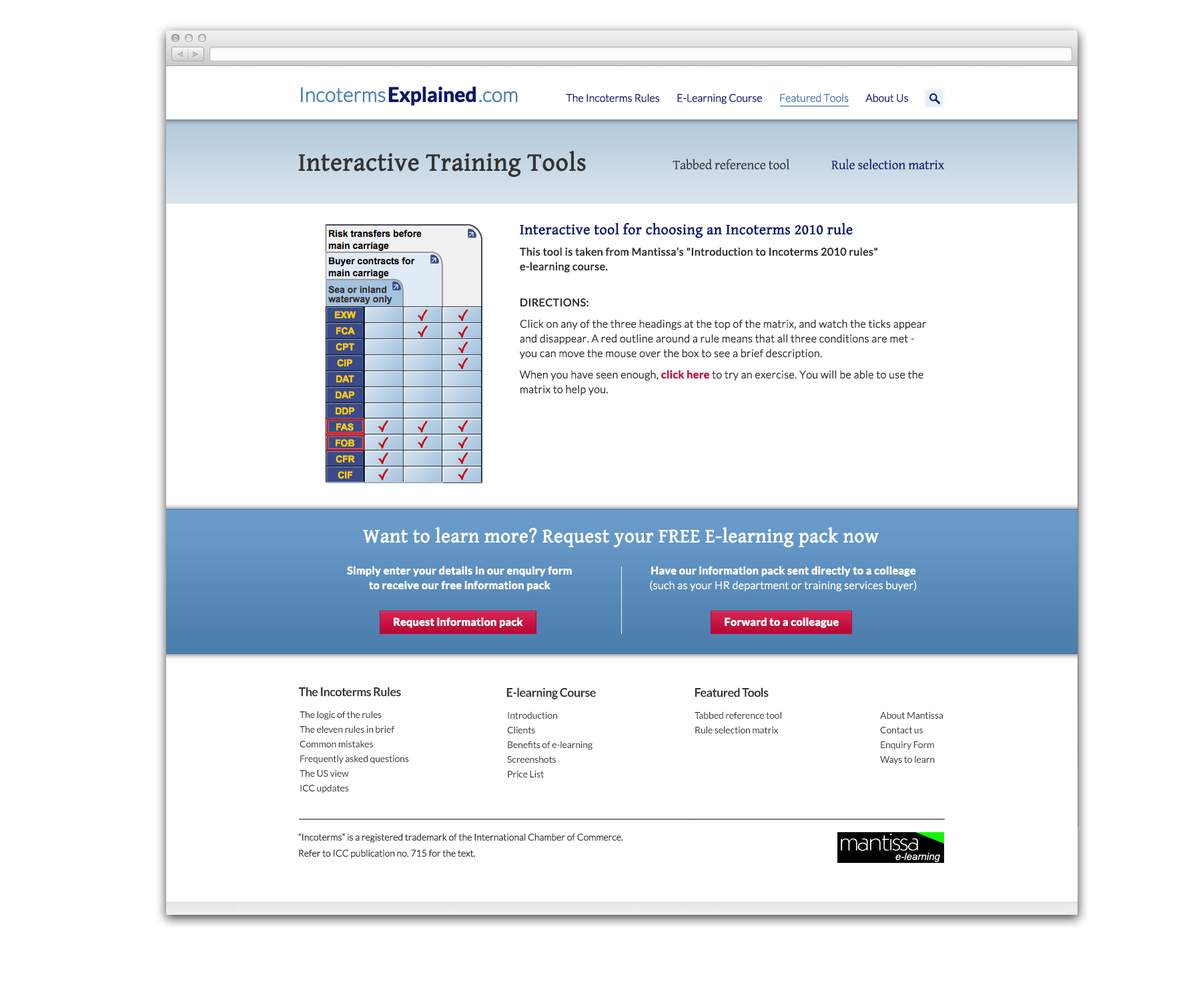
<style>
.page{position:relative;width:1201px;height:993px;background:#ffffff}
.page>*{position:absolute;margin:0}
.t1{font:20px "Lato-Light";letter-spacing:-0.02em;color:#4983b7;font-weight:bold}
.t2{font:20px "Lato-Bold";letter-spacing:-0.02em;color:#091770;font-weight:bold}
.t3{font:20px "Lato-Light";letter-spacing:-0.02em;color:#4882b7;font-weight:bold}
.t4{font:16px "Lato-Regular";letter-spacing:-0.02em;color:#ffffff;font-weight:bold}
.t5{font:16px "Lato-Regular";letter-spacing:-0.02em;color:#ffffff;text-transform:uppercase;font-weight:bold}
.t6{font:10.7px "Lato-Light";letter-spacing:-0.02em;color:#091770;font-weight:bold}
.t7{font:10.7px "Lato-Light";letter-spacing:-0.02em;color:#4882b7;font-weight:bold}
.t8{font:25.4px "GentiumBasic";color:#333333;font-weight:bold}
.t9{font:28.8px "GentiumBasic";letter-spacing:-0.02em;color:#ffffff;text-transform:uppercase;font-weight:bold}
.t10{font:13.3px "GentiumBasic";letter-spacing:-0.01em;color:#333333}
.t11{font:13.3px "GentiumBasic";letter-spacing:-0.01em;color:#091770}
.t12{font:10.7px/14.7px "Lato-Light";color:#313131;font-weight:bold}
.t13{font:14.7px/14.7px "GentiumBasic";color:#091770;font-weight:bold}
.t14{font:10.7px/14.7px "Lato-Regular";color:#313131;font-weight:bold}
.t15{font:10.7px/14.7px "Lato-Bold";color:#c3113e;font-weight:bold}
.t16{font:19.5px "GentiumBasic";color:#ffffff;font-weight:bold}
.t17{font:14.7px "GentiumBasic";letter-spacing:-0.02em;color:#ffffff;text-transform:uppercase;font-weight:bold}
.t18{font:10.7px/14.7px "Lato-Bold";color:#ffffff;font-weight:bold}
.t19{font:10.7px/14.7px "Lato-Light";color:#ffffff;font-weight:bold}
.t20{font:10.7px "Lato-Bold";color:#ffffff;font-weight:bold}
.t21{font:12px "Lato-Bold";letter-spacing:-0.03em;color:#333333}
.t22{font:9.3px/14.7px "Lato-Regular";letter-spacing:-0.01em;color:#333333}
.t23{font:9.3px/16.1px "Lato-Light";letter-spacing:-0.02em;color:#333333;font-weight:bold}
</style>
<div class="page">
<p class="t1" style="left:301px;top:86px;width:217px;height:19px">Incoterms<span class="t2">Explained</span><span class="t3">.com<br></span><span class="t4"><br></span><span class="t5"></span></p>
<p class="t6" style="left:566px;top:93px;width:342px;height:11px">The Incoterms Rules        E-Learning Course        <span class="t7">Featured Tools</span>        About Us</p>
<p class="t8" style="left:298px;top:150px;width:288px;height:27px">Interactive Training Tools<br><span class="t9"></span></p>
<p class="t10" style="left:673px;top:159px;width:272px;height:10px">Tabbed reference tool               <span class="t11">Rule selection matrix</span></p>
<p class="t12" style="left:519px;top:222px;width:407px;height:173px"><span class="t13">Interactive tool for choosing an Incoterms 2010 rule<br></span><span class="t14">This tool is taken from Mantissa’s "Introduction to Incoterms 2010 rules" <br>e-learning course.<br><br>DIRECTIONS:<br></span>Click on any of the three headings at the top of the matrix, and watch the ticks appear and disappear. A red outline around a rule means that all three conditions are met - <br>you can move the mouse over the box to see a brief description.<br>When you have seen enough, <span class="t15">click here</span> to try an exercise. You will be able to use the matrix to help you.</p>
<p class="t16" style="left:363px;top:526px;width:516px;height:22px">Want to learn more? Request your FREE E-learning pack now<br><span class="t17"></span></p>
<p class="t18" style="left:347px;top:566px;width:225px;height:25px;text-align:center">Simply enter your details in our enquiry form <br>to receive our free information pack</p>
<p class="t19" style="left:650px;top:566px;width:267px;height:25px;text-align:center"><span class="t18">Have our information pack sent directly to a colleage<br></span>(such as your HR department or training services buyer)</p>
<p class="t20" style="left:394px;top:617px;width:129px;height:11px">Request information pack</p>
<p class="t20" style="left:725px;top:617px;width:114px;height:11px">Forward to a colleague</p>
<p class="t21" style="left:298px;top:687px;width:103px;height:10px">The Incoterms Rules</p>
<p class="t21" style="left:506px;top:687px;width:90px;height:12px">E-learning Course</p>
<p class="t21" style="left:695px;top:687px;width:74px;height:10px">Featured Tools</p>
<p class="t22" style="left:300px;top:711px;width:109px;height:82px">The logic of the rules<br>The eleven rules in brief<br>Common mistakes<br>Frequently asked questions<br>The US view<br>ICC updates</p>
<p class="t22" style="left:507px;top:711px;width:86px;height:66px">Introduction<br>Clients<br>Benefits of e-learning<br>Screenshots<br>Price List</p>
<p class="t22" style="left:695px;top:711px;width:86px;height:22px">Tabbed reference tool <br>Rule selection matrix</p>
<p class="t22" style="left:880px;top:711px;width:63px;height:54px">About Mantissa<br>Contact us<br>Enquiry Form<br>Ways to learn</p>
<p class="t23" style="left:298px;top:833px;width:325px;height:26px">“Incoterms” is a registered trademark of the International Chamber of Commerce. <br>Refer to ICC publication no. 715 for the text.</p>
</div>
